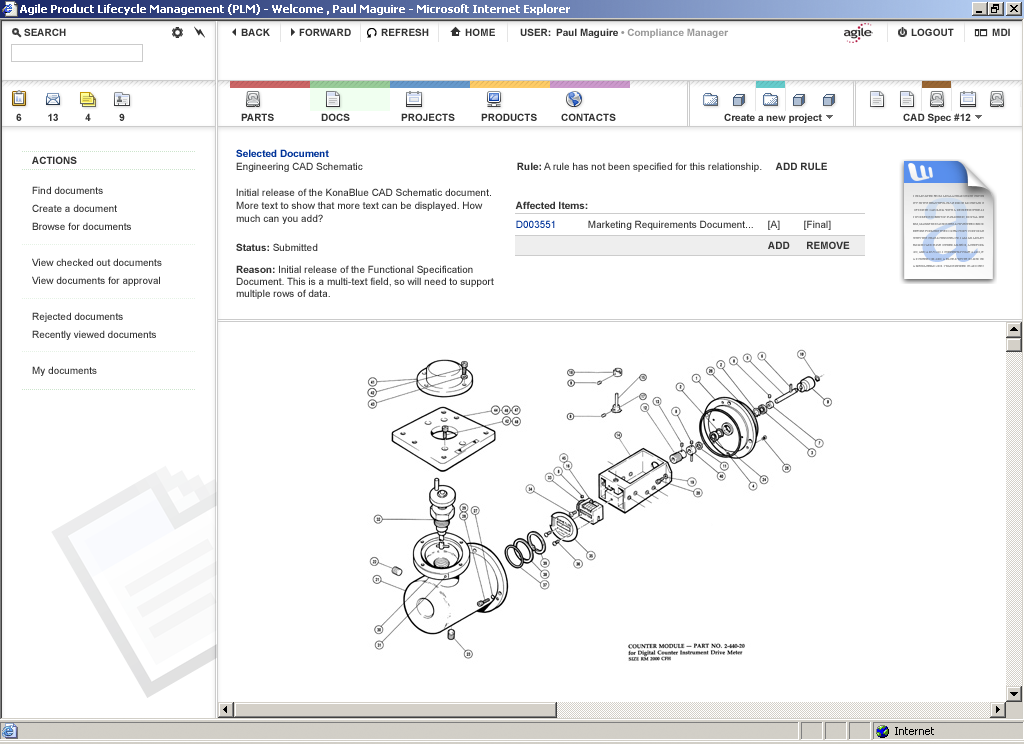
<style>
.page{position:relative;width:1024px;height:744px;background:#ffffff}
.page>*{position:absolute;margin:0}
.t1{font:10px "Arial-BoldMT";color:#333333}
.t2{font:10px "Arial-BoldMT";color:#999999}
.t3{font:10px/13px "ArialMT";color:#333333}
.t4{font:10px/12px "Arial-BoldMT";color:#003399}
.t5{font:10px "ArialMT";color:#333333}
.t6{font:10px/18px "ArialMT";color:#333333}
.t7{font:10px "ArialMT";color:#003399}
.t8{font:10px/12px "ArialMT";color:#333333}
.t9{font:10px/12px "Arial-BoldMT";color:#333333}
</style>
<div class="page">
<p class="t1" style="left:24px;top:28px;width:42px;height:8px">SEARCH</p>
<p class="t1" style="left:241px;top:28px;width:29px;height:8px">BACK</p>
<p class="t1" style="left:299px;top:28px;width:52px;height:8px">FORWARD</p>
<p class="t1" style="left:381px;top:28px;width:48px;height:8px">REFRESH</p>
<p class="t1" style="left:465px;top:28px;width:30px;height:8px">HOME</p>
<p class="t2" style="left:520px;top:28px;width:209px;height:10px"><span class="t1">USER: Paul Maguire </span>• Compliance Manager</p>
<p class="t1" style="left:911px;top:28px;width:43px;height:8px">LOGOUT</p>
<p class="t1" style="left:992px;top:28px;width:18px;height:8px">MDI</p>
<p class="t1" style="left:16px;top:113px;width:6px;height:8px">6</p>
<p class="t1" style="left:48px;top:113px;width:10px;height:8px">13</p>
<p class="t1" style="left:85px;top:113px;width:6px;height:8px">4</p>
<p class="t1" style="left:119px;top:113px;width:6px;height:8px">9</p>
<p class="t1" style="left:241px;top:113px;width:33px;height:8px">PARTS</p>
<p class="t1" style="left:321px;top:113px;width:29px;height:8px">DOCS</p>
<p class="t1" style="left:401px;top:113px;width:54px;height:8px">PROJECTS</p>
<p class="t1" style="left:481px;top:113px;width:56px;height:8px">PRODUCTS</p>
<p class="t1" style="left:561px;top:113px;width:55px;height:8px">CONTACTS</p>
<p class="t1" style="left:724px;top:113px;width:98px;height:10px">Create a new project</p>
<p class="t1" style="left:903px;top:113px;width:68px;height:10px">CAD Spec #12</p>
<p class="t3" style="left:236px;top:149px;width:255px;height:75px"><span class="t4">Selected Document<br></span>Engineering CAD Schematic<br><br>Initial release of the KonaBlue CAD Schematic document.<br>More text to show that more text can be displayed. How<br>much can you add?</p>
<p class="t1" style="left:32px;top:156px;width:45px;height:8px">ACTIONS</p>
<p class="t5" style="left:517px;top:162px;width:310px;height:10px"><span class="t1">Rule:</span> A rule has not been specified for this relationship.     <span class="t1">ADD RULE</span></p>
<p class="t6" style="left:32px;top:186px;width:130px;height:190px">Find documents<br>Create a document<br>Browse for documents<br><br>View checked out documents<br>View documents for approval<br><br>Rejected documents<br>Recently viewed documents<br><br>My documents</p>
<p class="t1" style="left:515px;top:201px;width:73px;height:8px">Affected Items:</p>
<p class="t5" style="left:516px;top:220px;width:315px;height:10px"><span class="t7">D003551 </span>Marketing Requirements Document... [A] [Final]</p>
<p class="t8" style="left:236px;top:243px;width:258px;height:56px"><span class="t9">Status:</span> Submitted<br><span class="t9">Reason:</span> Initial release of the Functional Specification<br>Document. This is a multi-text field, so will need to support<br>multiple rows of data.</p>
<p class="t1" style="left:768px;top:241px;width:82px;height:8px">ADD      REMOVE</p>
</div>
